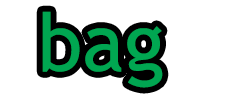
<style>
.page{position:relative;width:239px;height:108px;background:#ffffff}
.page>*{position:absolute;margin:0}
.t1{font:80px "TrebuchetMS";color:#00a651}
</style>
<div class="page">
<p class="t1" style="left:42px;top:11px;width:121px;height:77px">bag</p>
</div>
